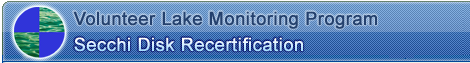
<style>
.page{position:relative;width:470px;height:63px}
.page>*{position:absolute;margin:0}
.t1{font:18px "ArialMT";letter-spacing:0.01em;color:#24416e;font-weight:bold}
.t2{font:18px "ArialMT";letter-spacing:0.01em;font-weight:bold}
</style>
<div class="page">
<p class="t1" style="left:73px;top:11px;width:304px;height:18px">Volunteer Lake Monitoring Program</p>
<p class="t2" style="left:74px;top:37px;width:229px;height:15px">Secchi Disk Recertification</p>
</div>
